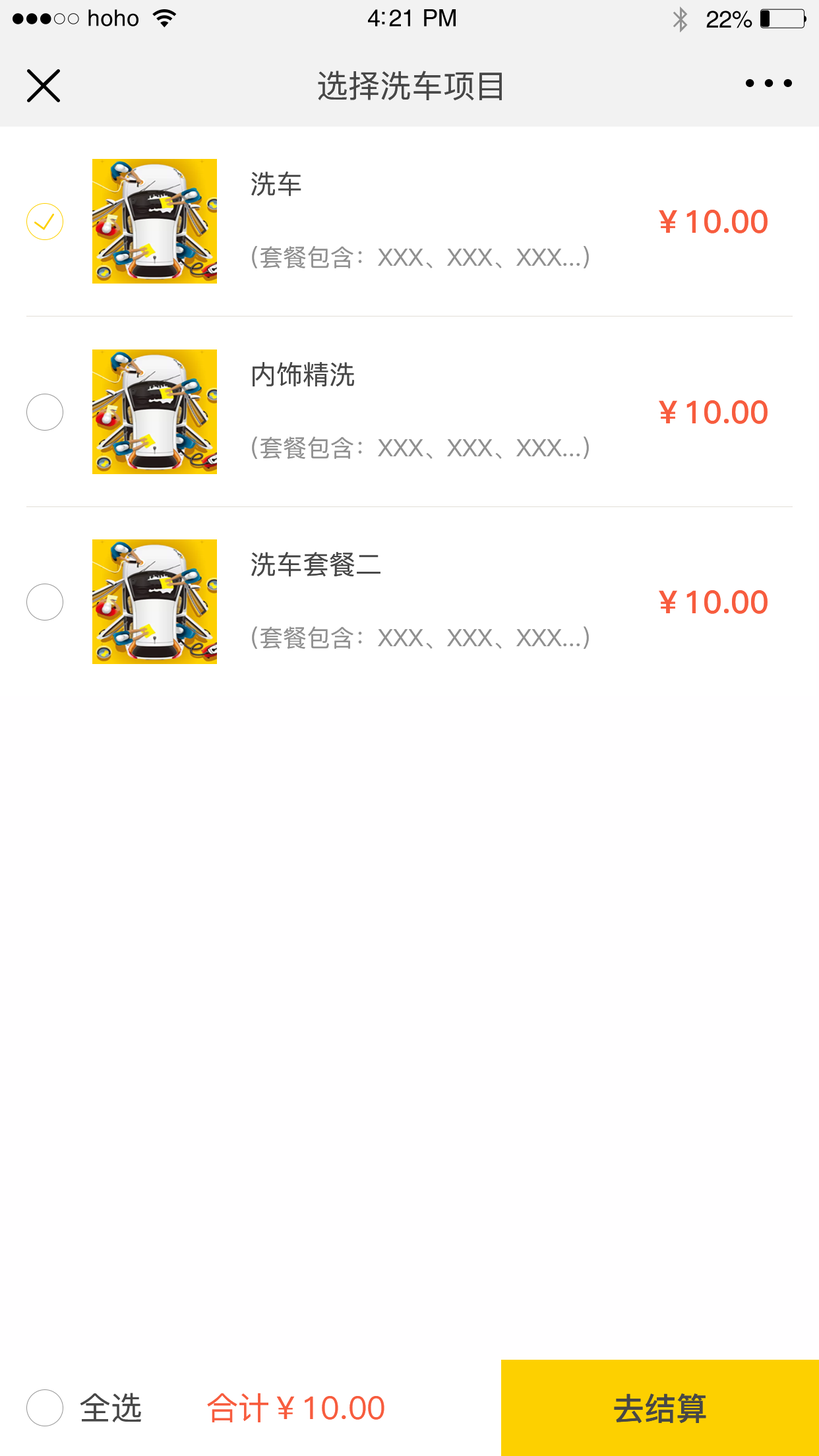
<style>
.page{position:relative;width:819px;height:1456px;background:#fffeff}
.page>*{position:absolute;margin:0}
.t1{font:22.8px "Helvetica";letter-spacing:0.02em;color:#000000}
.t2{font:23.8px "Helvetica";letter-spacing:-0.02em;color:#000000}
.t3{font:31.7px "PingFang-SC-Medium";color:#474747}
.t4{font:26.4px "PingFang-SC-Medium";color:#474747}
.t5{font:31.7px "PingFang-SC-Bold";color:#f75c3e}
.t6{font:23.7px "PingFang-SC-Medium";color:#909090}
.t7{font:31.7px "PingFang-SC-Medium";color:#f75c3e}
.t8{font:31.7px "PingFang-SC-Bold";color:#474747}
</style>
<div class="page">
<p class="t1" style="left:88px;top:9px;width:50px;height:17px">hoho</p>
<p class="t2" style="left:368px;top:9px;width:88px;height:17px">4:21 PM</p>
<p class="t2" style="left:706px;top:11px;width:46px;height:17px">22%</p>
<p class="t3" style="left:318px;top:71px;width:184px;height:30px">选择洗车项目</p>
<p class="t4" style="left:251px;top:171px;width:50px;height:26px">洗车</p>
<p class="t5" style="left:659px;top:210px;width:109px;height:23px">￥10.00</p>
<p class="t6" style="left:252px;top:246px;width:337px;height:22px">（套餐包含：XXX、XXX、XXX...）</p>
<p class="t4" style="left:253px;top:362px;width:101px;height:24px">内饰精洗</p>
<p class="t5" style="left:659px;top:400px;width:109px;height:24px">￥10.00</p>
<p class="t6" style="left:252px;top:437px;width:337px;height:22px">（套餐包含：XXX、XXX、XXX...）</p>
<p class="t4" style="left:251px;top:552px;width:129px;height:25px">洗车套餐二</p>
<p class="t5" style="left:659px;top:590px;width:109px;height:24px">￥10.00</p>
<p class="t6" style="left:252px;top:626px;width:337px;height:23px">（套餐包含：XXX、XXX、XXX...）</p>
<p class="t3" style="left:80px;top:1393px;width:61px;height:29px">全选</p>
<p class="t7" style="left:207px;top:1393px;width:177px;height:29px">合计￥10.00</p>
<p class="t8" style="left:614px;top:1393px;width:92px;height:31px">去结算</p>
</div>
